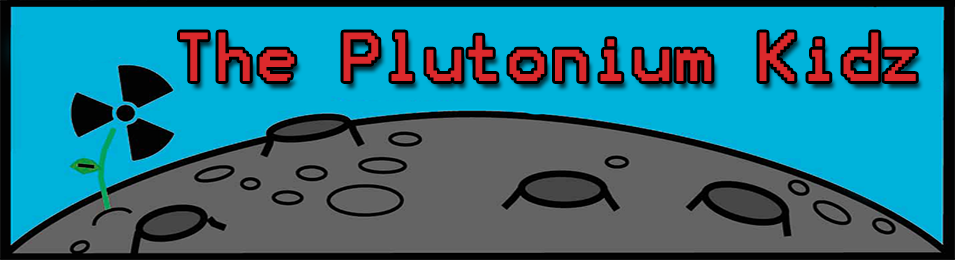
<style>
.page{position:relative;width:955px;height:260px;background:#00b3db}
.page>*{position:absolute;margin:0}
.t1{font:55.6px "Terminal";color:#dc292c}
</style>
<div class="page">
<p class="t1" style="left:180px;top:32px;width:736px;height:49px">The Plutonium Kidz</p>
</div>
